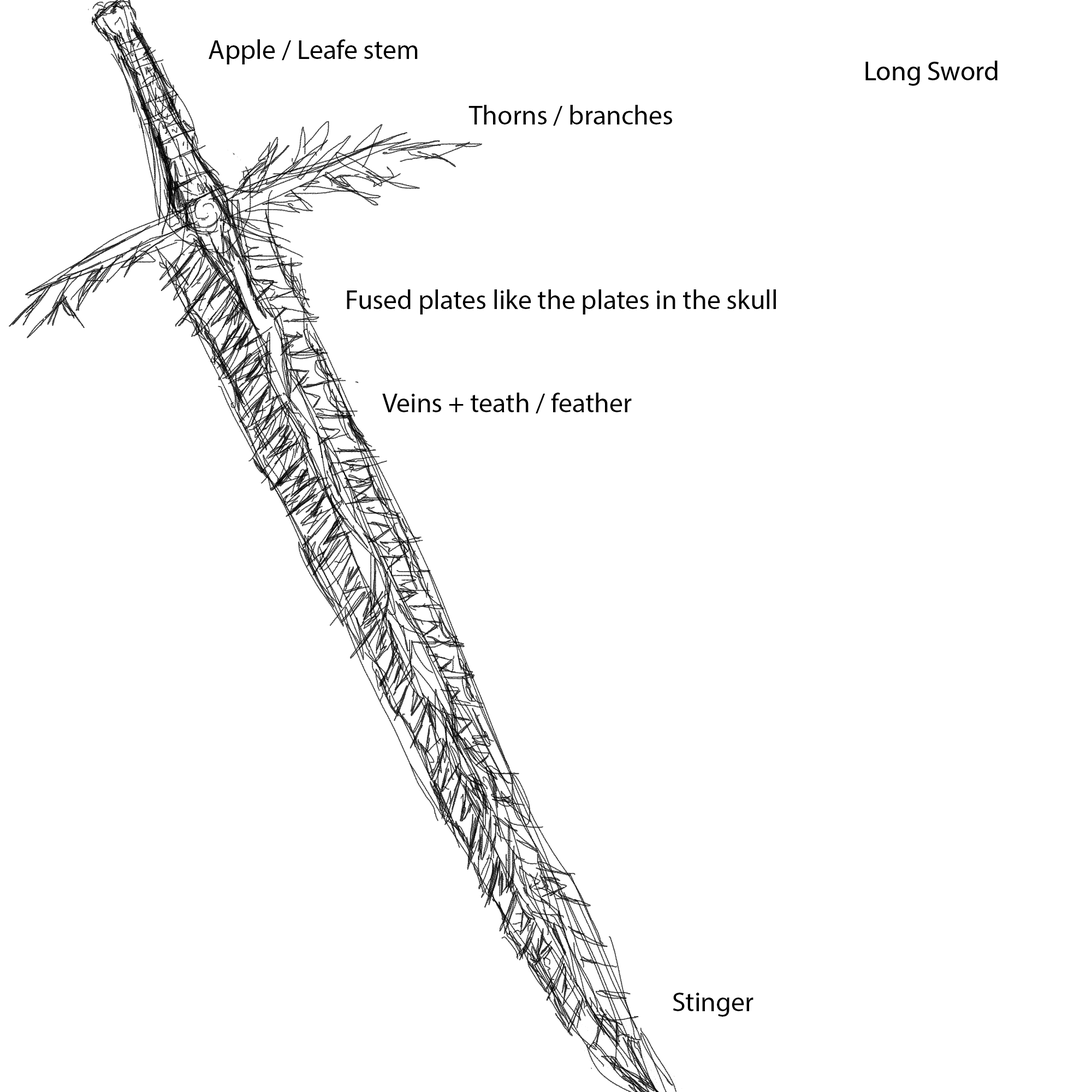
<style>
.page{position:relative;width:1092px;height:1092px;background:#ffffff}
.page>*{position:absolute;margin:0}
.t1{font:27.3px "MyriadPro-Regular";color:#000000}
</style>
<div class="page">
<p class="t1" style="left:209px;top:39px;width:209px;height:25px">Apple / Leafe stem</p>
<p class="t1" style="left:468px;top:105px;width:204px;height:21px">Thorns / branches</p>
<p class="t1" style="left:347px;top:289px;width:429px;height:25px">Fused plates like the plates in the skull</p>
<p class="t1" style="left:382px;top:393px;width:250px;height:21px">Veins + teath / feather</p>
<p class="t1" style="left:673px;top:993px;width:80px;height:24px">Stinger</p>
</div>
